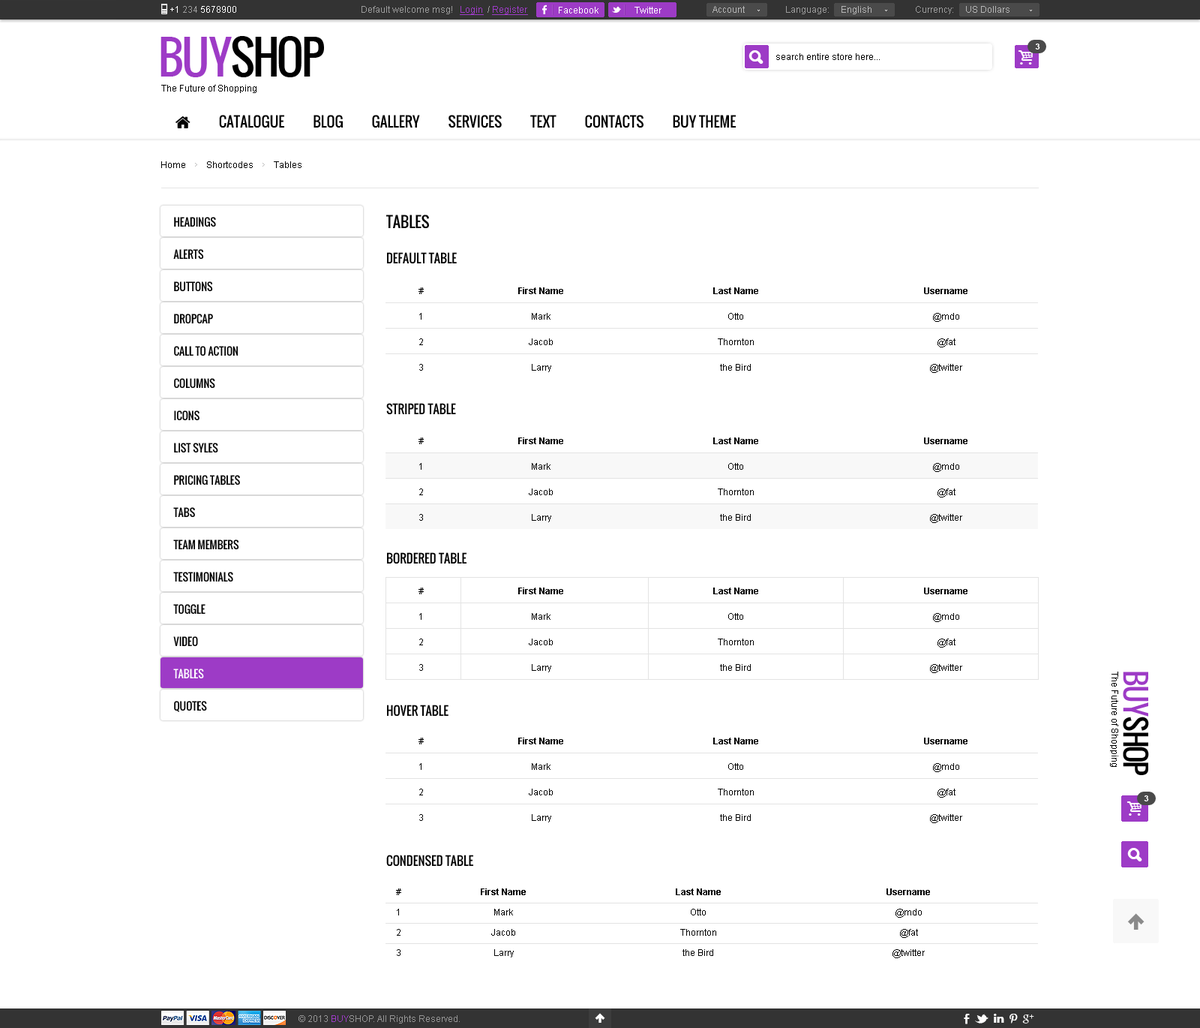
<style>
.page{position:relative;width:1200px;height:1028px;background:#ffffff}
.page>*{position:absolute;margin:0}
.t1{font:9px "ArialMT";color:#ffffff}
.t2{font:9px "ArialMT";color:#9b9b9b}
.t3{font:9px "ArialMT";color:#9d3bc6;text-decoration:underline}
.t4{font:9px "ArialMT";color:#b6b6b6}
.t5{font:45px "Oswald";letter-spacing:-0.06em;color:#000000;text-transform:uppercase}
.t6{font:45px "Oswald";letter-spacing:-0.06em;color:#9d3bc6;text-transform:uppercase}
.t7{font:9px "ArialMT";color:#000000}
.t8{font:8.2px "Arial-BoldMT";color:#ffffff;text-transform:uppercase}
.t9{font:10.5px/32.2px "Oswald";color:#000000;text-transform:uppercase}
.t10{font:10.5px/32.2px "Oswald";color:#ffffff;text-transform:uppercase}
.t11{font:15px "Oswald";color:#000000;text-transform:uppercase}
.t12{font:12px "Oswald";color:#000000;text-transform:uppercase}
.t13{font:9px/25.5px "ArialMT";color:#000000}
.t14{font:9px/25.5px "Arial-BoldMT";color:#000000}
.t15{font:28.5px "Oswald";letter-spacing:-0.06em;color:#000000;text-transform:uppercase}
.t16{font:28.5px "Oswald";letter-spacing:-0.06em;color:#9d3bc6;text-transform:uppercase}
.t17{font:9px/20.2px "ArialMT";color:#000000}
.t18{font:9px/20.2px "Arial-BoldMT";color:#000000}
.t19{font:9px "ArialMT";color:#959595}
.t20{font:9px "ArialMT";color:#9d3bc6}
</style>
<div class="page">
<p class="t1" style="left:170px;top:6px;width:66px;height:7px">+1 <span class="t2">234 </span>5678900</p>
<p class="t2" style="left:362px;top:6px;width:166px;height:9px">Default welcome msg!   <span class="t3">Login </span> / <span class="t3">Register</span></p>
<p class="t2" style="left:362px;top:6px;width:166px;height:9px">Default welcome msg!   <span class="t3">Login </span> / <span class="t3">Register</span></p>
<p class="t4" style="left:712px;top:6px;width:33px;height:7px">Account</p>
<p class="t2" style="left:786px;top:6px;width:86px;height:8px">Language:     <span class="t4">English</span></p>
<p class="t4" style="left:916px;top:6px;width:94px;height:8px"><span class="t2">Currency:     </span>US Dollars</p>
<p class="t1" style="left:559px;top:7px;width:39px;height:7px">Facebook</p>
<p class="t1" style="left:634px;top:7px;width:28px;height:7px">Twitter</p>
<p class="t5" style="left:160px;top:36px;width:164px;height:41px"><span class="t6">buy</span>shop</p>
<p class="t7" style="left:776px;top:53px;width:104px;height:7px">search entire store here...</p>
<p class="t8" style="left:1035px;top:44px;width:5px;height:6px">3</p>
<p class="t7" style="left:161px;top:85px;width:95px;height:8px">The Future of Shopping</p>
<p class="t7" style="left:161px;top:161px;width:141px;height:7px">Home         Shortcodes         Tables</p>
<p class="t9" style="left:173px;top:217px;width:67px;height:495px">Headings<br>Alerts<br>Buttons<br>Dropcap<br>Call To Action<br>Columns<br>Icons<br>List syles<br>Pricing Tables<br>Tabs<br>Team Members<br>Testimonials<br>Toggle<br>Video<br><span class="t10">Tables<br></span>Quotes</p>
<p class="t11" style="left:386px;top:214px;width:43px;height:15px">Tables</p>
<p class="t12" style="left:387px;top:252px;width:70px;height:12px">DEFAULT TABLE</p>
<p class="t13" style="left:418px;top:287px;width:6px;height:83px;text-align:center">#<br>1<br>2<br>3</p>
<p class="t13" style="left:518px;top:287px;width:45px;height:85px;text-align:center"><span class="t14">First Name<br></span>Mark<br>Jacob<br>Larry</p>
<p class="t13" style="left:713px;top:287px;width:45px;height:83px;text-align:center"><span class="t14">Last Name<br></span>Otto<br>Thornton<br>the Bird</p>
<p class="t13" style="left:924px;top:287px;width:44px;height:86px;text-align:center"><span class="t14">Username<br></span>@mdo<br>@fat<br>@twitter</p>
<p class="t12" style="left:386px;top:403px;width:70px;height:12px">STRIPED TABLE</p>
<p class="t13" style="left:418px;top:437px;width:6px;height:83px;text-align:center">#<br>1<br>2<br>3</p>
<p class="t13" style="left:518px;top:437px;width:45px;height:85px;text-align:center"><span class="t14">First Name<br></span>Mark<br>Jacob<br>Larry</p>
<p class="t13" style="left:713px;top:437px;width:45px;height:83px;text-align:center"><span class="t14">Last Name<br></span>Otto<br>Thornton<br>the Bird</p>
<p class="t13" style="left:924px;top:437px;width:44px;height:86px;text-align:center"><span class="t14">Username<br></span>@mdo<br>@fat<br>@twitter</p>
<p class="t12" style="left:387px;top:552px;width:79px;height:12px">BORDERED TABLE</p>
<p class="t13" style="left:418px;top:587px;width:6px;height:83px;text-align:center">#<br>1<br>2<br>3</p>
<p class="t13" style="left:518px;top:587px;width:45px;height:85px;text-align:center"><span class="t14">First Name<br></span>Mark<br>Jacob<br>Larry</p>
<p class="t13" style="left:713px;top:587px;width:45px;height:83px;text-align:center"><span class="t14">Last Name<br></span>Otto<br>Thornton<br>the Bird</p>
<p class="t13" style="left:924px;top:587px;width:44px;height:86px;text-align:center"><span class="t14">Username<br></span>@mdo<br>@fat<br>@twitter</p>
<p class="t7" style="left:1110px;top:671px;width:8px;height:95px;rotate:90deg">The Future of Shopping</p>
<p class="t15" style="left:1123px;top:671px;width:26px;height:104px;rotate:90deg"><span class="t16">buy</span>shop</p>
<p class="t12" style="left:387px;top:704px;width:61px;height:12px">HOVER TABLE</p>
<p class="t13" style="left:418px;top:737px;width:6px;height:83px;text-align:center">#<br>1<br>2<br>3</p>
<p class="t13" style="left:518px;top:737px;width:45px;height:85px;text-align:center"><span class="t14">First Name<br></span>Mark<br>Jacob<br>Larry</p>
<p class="t13" style="left:713px;top:737px;width:45px;height:83px;text-align:center"><span class="t14">Last Name<br></span>Otto<br>Thornton<br>the Bird</p>
<p class="t13" style="left:924px;top:737px;width:44px;height:86px;text-align:center"><span class="t14">Username<br></span>@mdo<br>@fat<br>@twitter</p>
<p class="t8" style="left:1144px;top:795px;width:5px;height:6px">3</p>
<p class="t12" style="left:386px;top:854px;width:87px;height:12px">CONDENSED TABLE</p>
<p class="t17" style="left:396px;top:888px;width:5px;height:68px;text-align:center">#<br>1<br>2<br>3</p>
<p class="t17" style="left:481px;top:888px;width:45px;height:69px;text-align:center"><span class="t18">First Name<br></span>Mark<br>Jacob<br>Larry</p>
<p class="t17" style="left:676px;top:888px;width:45px;height:68px;text-align:center"><span class="t18">Last Name<br></span>Otto<br>Thornton<br>the Bird</p>
<p class="t17" style="left:886px;top:888px;width:44px;height:70px;text-align:center"><span class="t18">Username<br></span>@mdo<br>@fat<br>@twitter</p>
<p class="t19" style="left:298px;top:1015px;width:162px;height:8px">© 2013 <span class="t20">BUY</span>SHOP. All Rights Reserved.</p>
</div>
